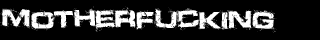
<style>
.page{position:relative;width:320px;height:40px;background:#000000}
.page>*{position:absolute;margin:0}
.t1{font:24px "Defused-ExtendedBold";letter-spacing:0.04em;color:#ffffff}
</style>
<div class="page">
<p class="t1" style="left:0px;top:6px;width:277px;height:27px">motherfucking</p>
</div>
